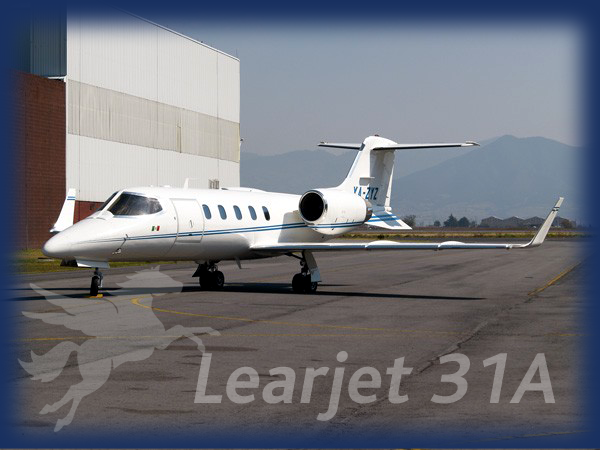
<style>
.page{position:relative;width:600px;height:450px}
.page>*{position:absolute;margin:0}
.t1{font:75.1px "BlissBold";color:#918b89;font-style:italic}
</style>
<div class="page">
<p class="t1" style="left:194px;top:351px;width:362px;height:70px">Learjet 31A</p>
</div>
